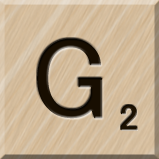
<style>
.page{position:relative;width:159px;height:159px}
.page>*{position:absolute;margin:0}
.t1{font:116px "MS-UIGothic";color:#180e01}
.t2{font:36px "MS-UIGothic";color:#1c1101;font-weight:bold;scale:1.1 1}
</style>
<div class="page">
<p class="t1" style="left:37px;top:38px;width:66px;height:81px">G</p>
<p class="t2" style="left:120px;top:104px;width:18px;height:27px">2</p>
</div>
